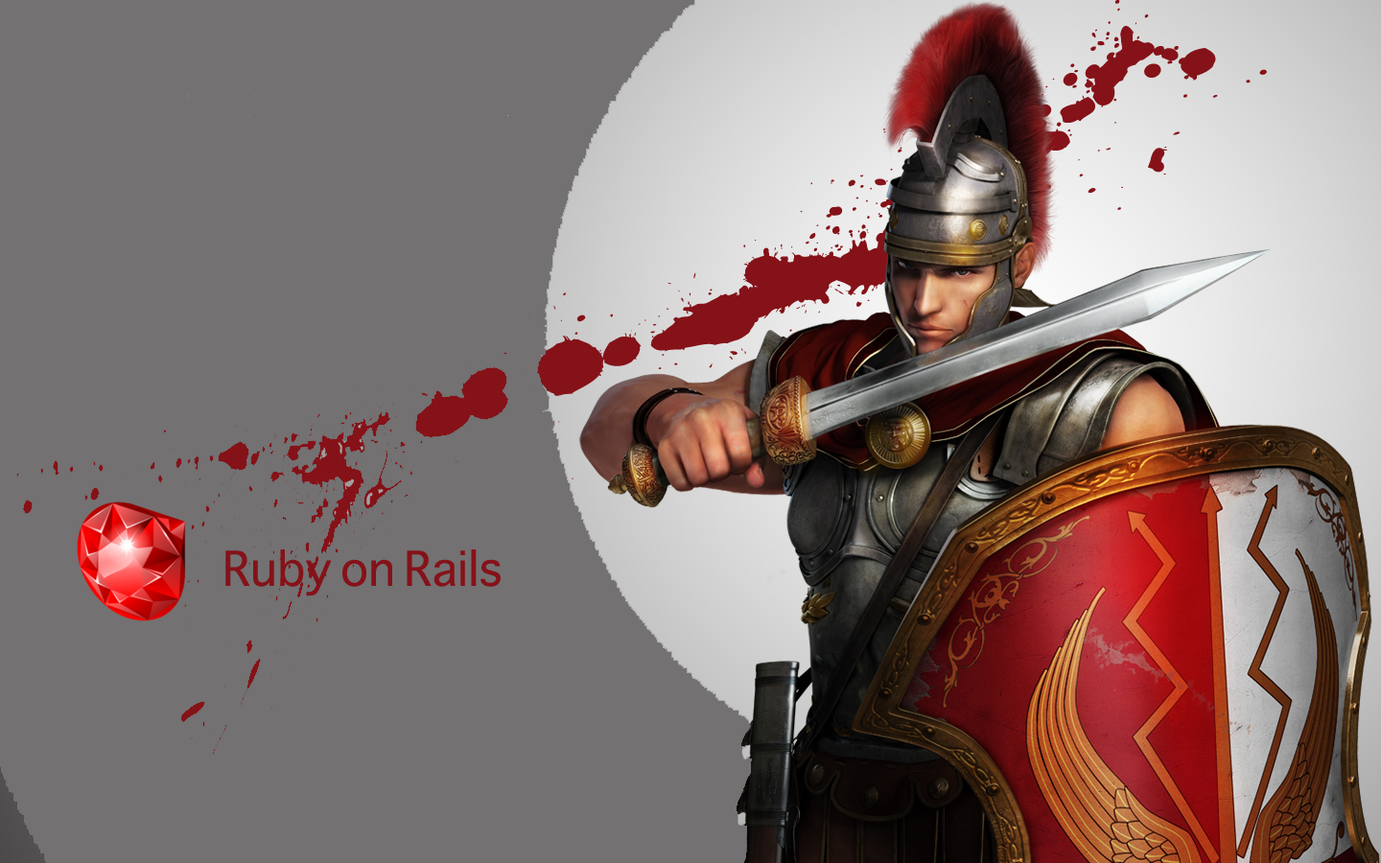
<style>
.page{position:relative;width:1381px;height:863px;background:#737172}
.page>*{position:absolute;margin:0}
.t1{font:46px "Sathu";color:#851219}
</style>
<div class="page">
<p class="t1" style="left:225px;top:550px;width:276px;height:47px">Ruby on Rails</p>
</div>
